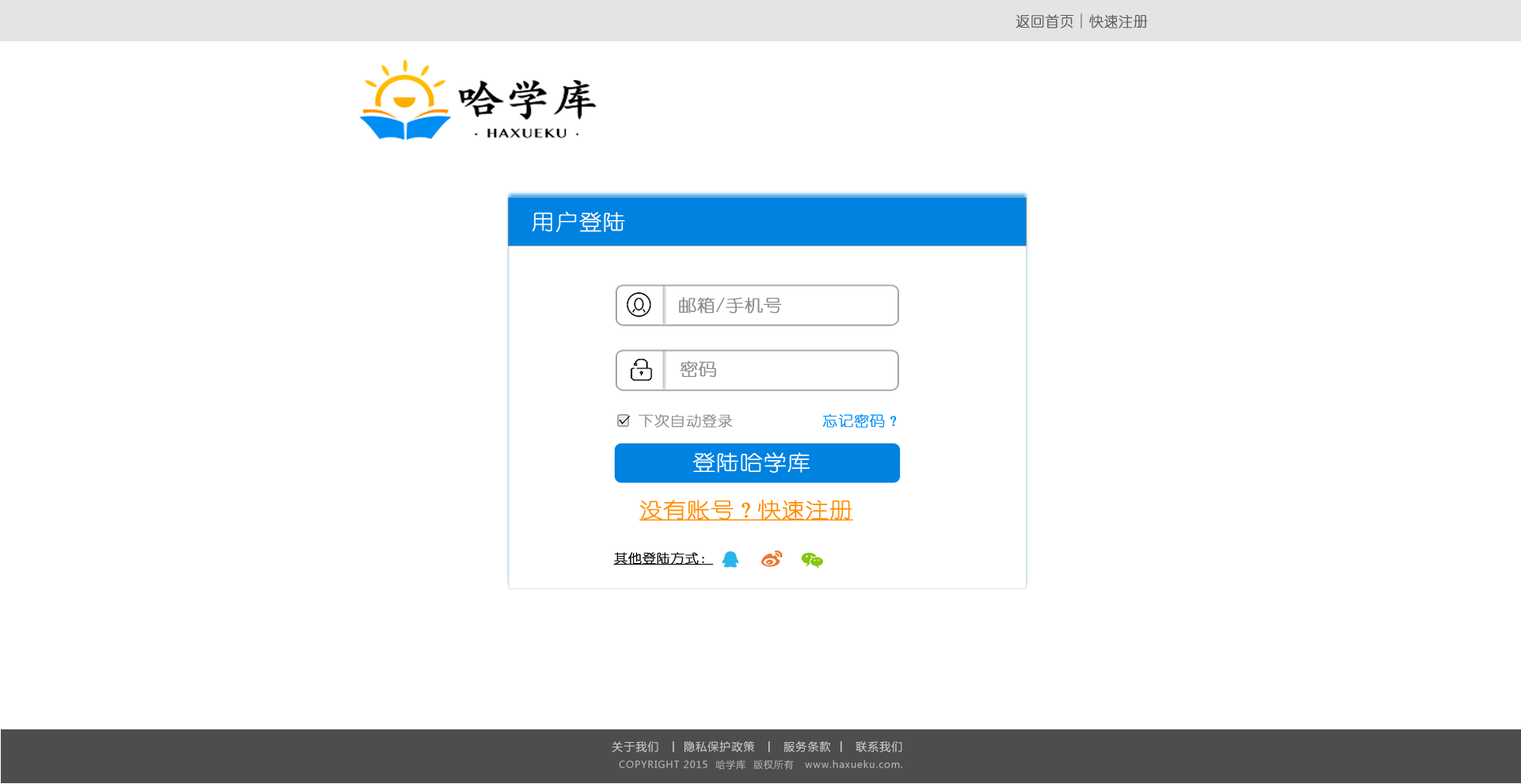
<style>
.page{position:relative;width:1521px;height:784px;background:#ffffff}
.page>*{position:absolute;margin:0}
.t1{font:14.3px "YouYuan";color:#5e5e5e;font-weight:bold}
.t2{font:21px "YouYuan";color:#ffffff;font-weight:bold;scale:1.1 1}
.t3{font:16.8px "YouYuan";color:#8d8d8d;font-weight:bold;scale:1.1 1}
.t4{font:14px "YouYuan";color:#8d8d8d;font-weight:bold;scale:1.1 1}
.t5{font:14px "YouYuan";color:#008ef5;font-weight:bold;scale:1.1 1}
.t6{font:11.1px "YouYuan";color:#000000;font-weight:bold}
.t7{font:21px "YouYuan";color:#ff8d03;font-weight:bold;text-decoration:underline;scale:1.1 1}
.t8{font:12.6px "YouYuan";color:#010100;font-weight:bold;text-decoration:underline;scale:1.1 1}
</style>
<div class="page">
<p class="t1" style="left:1015px;top:14px;width:133px;height:15px">返回首页  快速注册</p>
<p class="t2" style="left:532px;top:211px;width:93px;height:22px">用户登陆</p>
<p class="t3" style="left:679px;top:297px;width:103px;height:17px">邮箱/手机号</p>
<p class="t3" style="left:680px;top:360px;width:36px;height:17px">密码</p>
<p class="t4" style="left:638px;top:413px;width:258px;height:15px">下次自动登录           <span class="t5">忘记密码？</span></p>
<p class="t6" style="left:619px;top:416px;width:11px;height:9px">√</p>
<p class="t2" style="left:692px;top:452px;width:117px;height:21px">登陆哈学库</p>
<p class="t7" style="left:639px;top:499px;width:214px;height:22px">没有账号？快速注册</p>
<p class="t8" style="left:613px;top:552px;width:101px;height:13px">其他登陆方式：</p>
</div>
